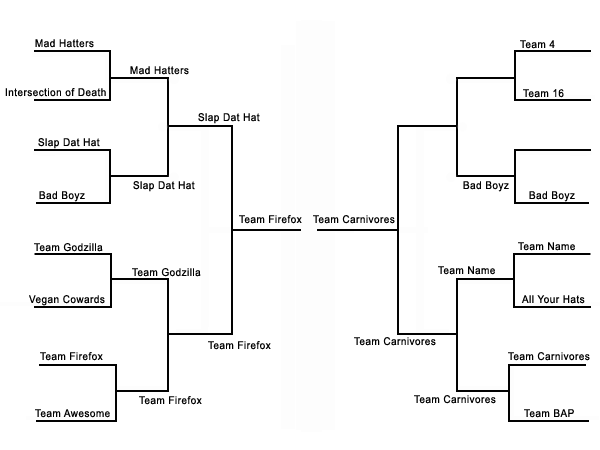
<style>
.page{position:relative;width:600px;height:450px;background:#ffffff}
.page>*{position:absolute;margin:0}
.t1{font:10.8px "ArialMT";letter-spacing:0.05em;color:#020202;scale:0.92 1}
</style>
<div class="page">
<p class="t1" style="left:35px;top:39px;width:59px;height:9px">Mad Hatters</p>
<p class="t1" style="left:520px;top:40px;width:35px;height:9px">Team 4</p>
<p class="t1" style="left:130px;top:66px;width:59px;height:9px">Mad Hatters</p>
<p class="t1" style="left:5px;top:88px;width:101px;height:9px">Intersection of Death</p>
<p class="t1" style="left:523px;top:89px;width:41px;height:9px">Team 16</p>
<p class="t1" style="left:198px;top:113px;width:62px;height:11px">Slap Dat Hat</p>
<p class="t1" style="left:38px;top:138px;width:62px;height:11px">Slap Dat Hat</p>
<p class="t1" style="left:133px;top:181px;width:62px;height:11px">Slap Dat Hat</p>
<p class="t1" style="left:463px;top:181px;width:46px;height:11px">Bad Boyz</p>
<p class="t1" style="left:39px;top:191px;width:46px;height:11px">Bad Boyz</p>
<p class="t1" style="left:529px;top:191px;width:46px;height:11px">Bad Boyz</p>
<p class="t1" style="left:239px;top:215px;width:63px;height:9px">Team Firefox</p>
<p class="t1" style="left:313px;top:215px;width:82px;height:9px">Team Carnivores</p>
<p class="t1" style="left:34px;top:243px;width:69px;height:9px">Team Godzilla</p>
<p class="t1" style="left:518px;top:242px;width:57px;height:9px">Team Name</p>
<p class="t1" style="left:132px;top:268px;width:69px;height:9px">Team Godzilla</p>
<p class="t1" style="left:438px;top:266px;width:57px;height:9px">Team Name</p>
<p class="t1" style="left:29px;top:295px;width:76px;height:11px">Vegan Cowards</p>
<p class="t1" style="left:521px;top:295px;width:64px;height:9px">All Your Hats</p>
<p class="t1" style="left:208px;top:341px;width:63px;height:9px">Team Firefox</p>
<p class="t1" style="left:354px;top:337px;width:82px;height:9px">Team Carnivores</p>
<p class="t1" style="left:40px;top:352px;width:63px;height:9px">Team Firefox</p>
<p class="t1" style="left:508px;top:352px;width:82px;height:9px">Team Carnivores</p>
<p class="t1" style="left:139px;top:396px;width:63px;height:9px">Team Firefox</p>
<p class="t1" style="left:414px;top:395px;width:82px;height:9px">Team Carnivores</p>
<p class="t1" style="left:35px;top:409px;width:75px;height:9px">Team Awesome</p>
<p class="t1" style="left:524px;top:409px;width:50px;height:9px">Team BAP</p>
</div>
